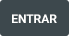
<style>
.page{position:relative;width:69px;height:36px;background:#3d484d}
.page>*{position:absolute;margin:0}
.t1{font:12px "Roboto-Bold";color:#ffffff;text-transform:uppercase}
</style>
<div class="page">
<p class="t1" style="left:12px;top:14px;width:45px;height:9px">ENTRAR</p>
</div>
